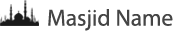
<style>
.page{position:relative;width:173px;height:31px;background:#ffffff}
.page>*{position:absolute;margin:0}
.t1{font:23.3px "MyriadPro-Regular";color:#454545}
</style>
<div class="page">
<p class="t1" style="left:48px;top:9px;width:125px;height:22px">Masjid Name</p>
</div>
